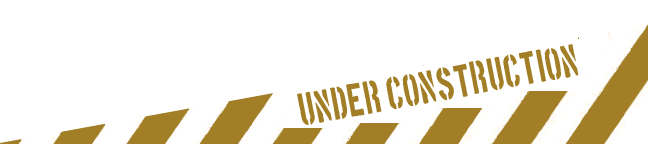
<style>
.page{position:relative;width:648px;height:144px;background:#ffffff}
.page>*{position:absolute;margin:0}
.t1{font:36.6px "BostonTraffic";letter-spacing:0.01em;color:#a27e26;scale:0.8 1}
</style>
<div class="page">
<p class="t1" style="left:297px;top:44px;width:282px;height:81px;rotate:-10deg">UNDER CONSTRUCTION</p>
</div>
